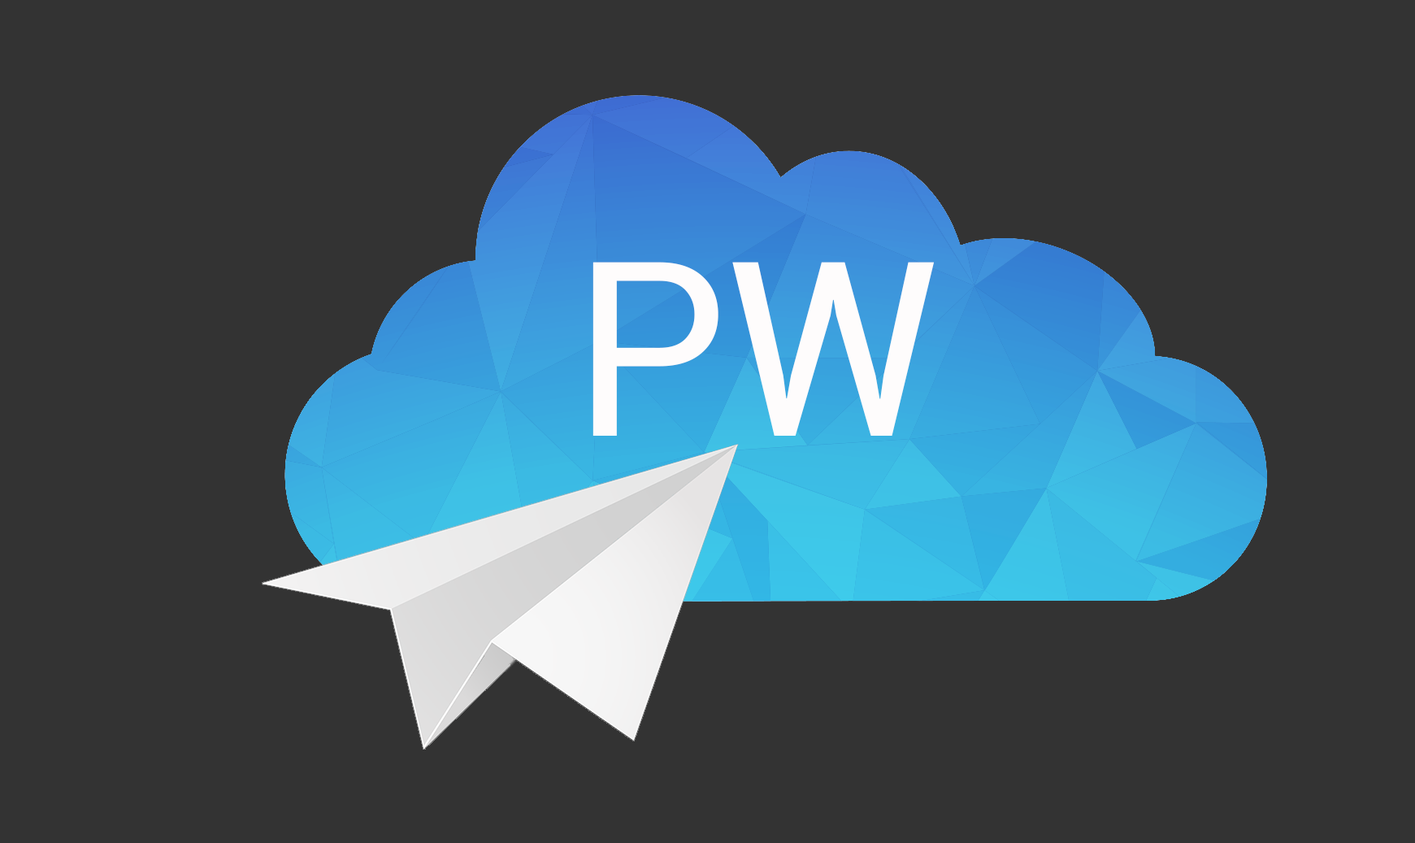
<style>
.page{position:relative;width:1415px;height:843px;background:#333333}
.page>*{position:absolute;margin:0}
.t1{font:243.8px "Roboto-Regular";color:#fefcfc}
</style>
<div class="page">
<p class="t1" style="left:592px;top:262px;width:342px;height:174px">PW</p>
</div>
